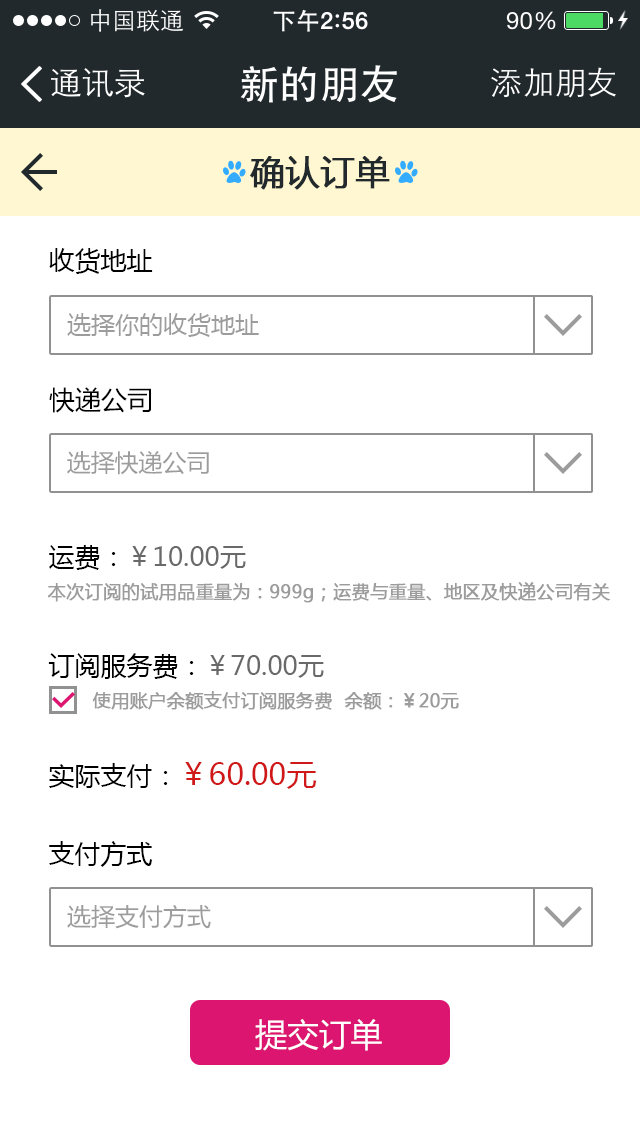
<style>
.page{position:relative;width:640px;height:1136px;background:#ffffff}
.page>*{position:absolute;margin:0}
.t1{font:34px "MicrosoftYaHei";color:#22292c;font-weight:bold}
.t2{font:26px "MicrosoftYaHei";color:#000000}
.t3{font:24px "MicrosoftYaHei";color:#9c9c9c}
.t4{font:26px "MicrosoftYaHei";color:#010101}
.t5{font:26px "MicrosoftYaHei";color:#696969}
.t6{font:18px "MicrosoftYaHei";color:#9c9c9c;font-weight:bold}
.t7{font:30px "MicrosoftYaHei";color:#d11818}
.t8{font:32.4px "MicrosoftYaHei";color:#ffffff}
</style>
<div class="page">
<p class="t1" style="left:250px;top:156px;width:140px;height:34px">确认订单</p>
<p class="t2" style="left:49px;top:248px;width:104px;height:26px">收货地址</p>
<p class="t3" style="left:67px;top:313px;width:192px;height:24px">选择你的收货地址</p>
<p class="t4" style="left:49px;top:387px;width:102px;height:26px">快递公司</p>
<p class="t3" style="left:67px;top:451px;width:142px;height:24px">选择快递公司</p>
<p class="t5" style="left:49px;top:545px;width:197px;height:25px"><span class="t2">运费：</span>￥10.00元</p>
<p class="t6" style="left:48px;top:582px;width:562px;height:21px">本次订阅的试用品重量为：999g；运费与重量、地区及快递公司有关</p>
<p class="t5" style="left:48px;top:653px;width:276px;height:26px"><span class="t2">订阅服务费：</span>￥70.00元</p>
<p class="t6" style="left:92px;top:691px;width:367px;height:19px">使用账户余额支付订阅服务费  余额：￥20元</p>
<p class="t7" style="left:49px;top:762px;width:268px;height:27px"><span class="t2">实际支付：</span>￥60.00元</p>
<p class="t2" style="left:49px;top:841px;width:104px;height:26px">支付方式</p>
<p class="t3" style="left:67px;top:905px;width:144px;height:24px">选择支付方式</p>
<p class="t8" style="left:255px;top:1019px;width:127px;height:32px">提交订单</p>
</div>
